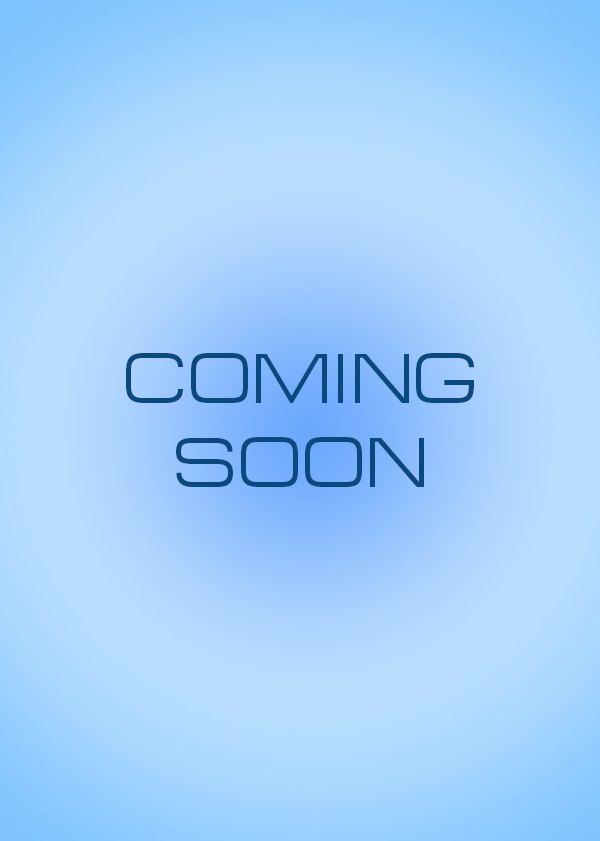
<style>
.page{position:relative;width:600px;height:841px}
.page>*{position:absolute;margin:0}
.t1{font:70.5px "EuropeExtendedC";color:#0a487e}
</style>
<div class="page">
<p class="t1" style="left:126px;top:353px;width:348px;height:134px;text-align:center">COMING<br>SOON</p>
</div>
